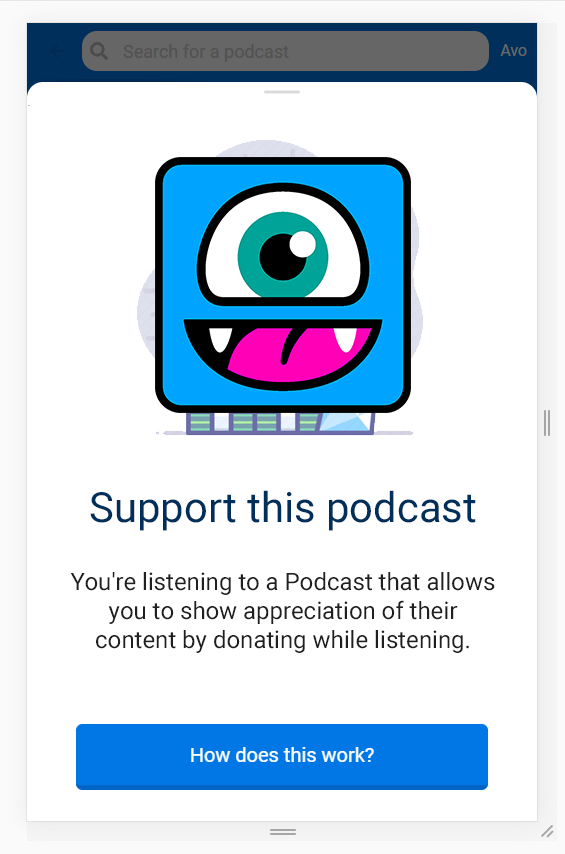
<style>
.page{position:relative;width:565px;height:854px;background:#ffffff}
.page>*{position:absolute;margin:0}
.t1{font:41.8px "Roboto-Regular";color:#002f5c}
.t2{font:24px "Roboto-Regular";color:#1f1f1f}
</style>
<div class="page">
<p class="t1" style="left:90px;top:490px;width:386px;height:41px">Support this podcast</p>
<p class="t2" style="left:70px;top:572px;width:425px;height:81px;text-align:center">You're listening to a Podcast that allows you to show appreciation of their content by donating while listening.</p>
</div>
